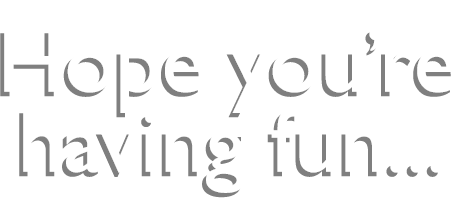
<style>
.page{position:relative;width:464px;height:222px;background:#ffffff}
.page>*{position:absolute;margin:0}
.t1{font:92px/80px "GillSansMT"}
</style>
<div class="page">
<p class="t1" style="left:0px;top:32px;width:451px;height:166px;text-align:center">Hope you’re<br>having fun...</p>
</div>
